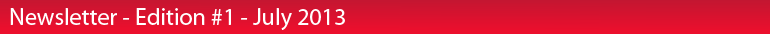
<style>
.page{position:relative;width:770px;height:34px}
.page>*{position:absolute;margin:0}
.t1{font:24px "MyriadPro-Regular";color:#ffffff}
</style>
<div class="page">
<p class="t1" style="left:10px;top:8px;width:335px;height:22px">Newsletter - Edition #1 - July 2013</p>
</div>
